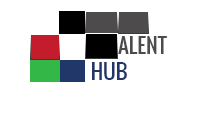
<style>
.page{position:relative;width:218px;height:115px;background:#ffffff}
.page>*{position:absolute;margin:0}
.t1{font:20.9px "Oswald-Regular";color:#4d4b4c}
.t2{font:20.9px "Oswald-Regular";color:#213769}
</style>
<div class="page">
<p class="t1" style="left:118px;top:36px;width:49px;height:18px">ALENT</p>
<p class="t2" style="left:92px;top:62px;width:35px;height:18px">HUB</p>
</div>
